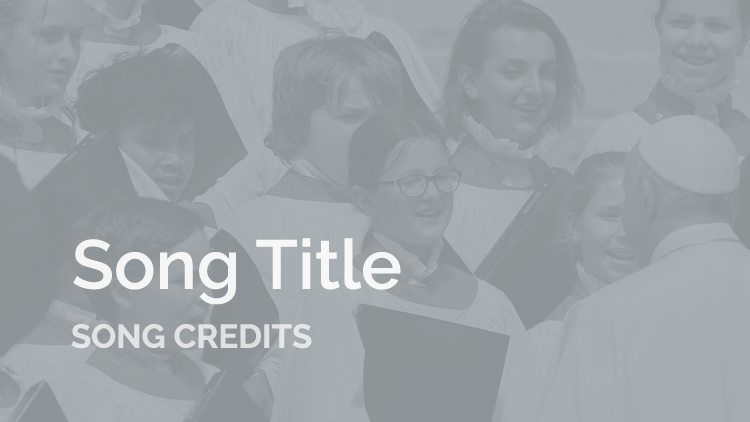
<style>
.page{position:relative;width:750px;height:422px}
.page>*{position:absolute;margin:0}
.t1{font:69.1px "Raleway-SemiBold";color:#ffffff}
.t2{font:33.2px "Raleway-Bold";color:#e1e3e4;text-transform:uppercase}
</style>
<div class="page">
<p class="t1" style="left:73px;top:238px;width:328px;height:67px;opacity:0.9">Song Title</p>
<p class="t2" style="left:71px;top:324px;width:241px;height:25px">song credits</p>
</div>
